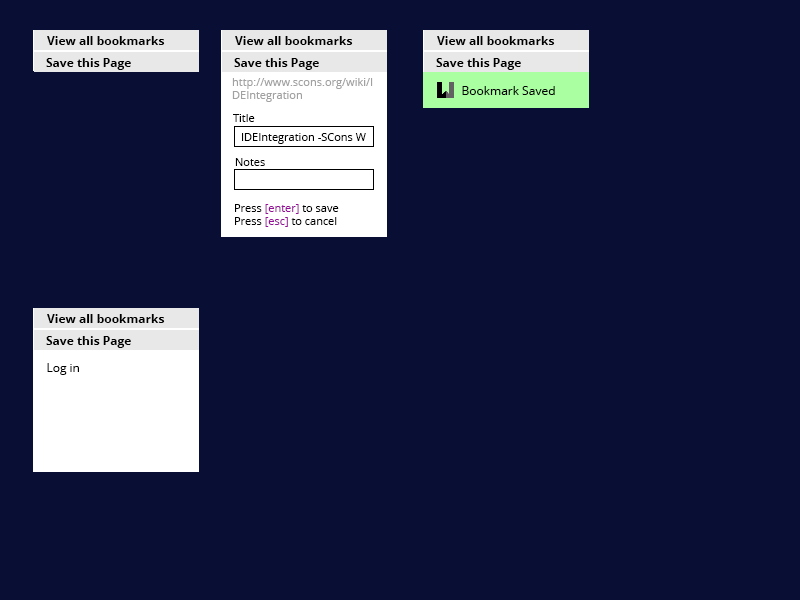
<style>
.page{position:relative;width:800px;height:600px;background:#090f34}
.page>*{position:absolute;margin:0}
.t1{font:12px "OpenSans-Bold";color:#000000}
.t2{font:11px "OpenSans";color:#a1a1a1}
.t3{font:12px "OpenSans";color:#000000}
.t4{font:11px "OpenSans";color:#000000}
.t5{font:11px "OpenSans";color:#971099}
</style>
<div class="page">
<p class="t1" style="left:47px;top:36px;width:118px;height:9px">View all bookmarks</p>
<p class="t1" style="left:235px;top:36px;width:118px;height:9px">View all bookmarks</p>
<p class="t1" style="left:437px;top:36px;width:118px;height:9px">View all bookmarks</p>
<p class="t1" style="left:46px;top:58px;width:85px;height:12px">Save this Page</p>
<p class="t1" style="left:234px;top:58px;width:85px;height:12px">Save this Page</p>
<p class="t1" style="left:436px;top:58px;width:85px;height:12px">Save this Page</p>
<p class="t2" style="left:232px;top:78px;width:141px;height:24px">http://www.scons.org/wiki/I<br>DEIntegration</p>
<p class="t3" style="left:462px;top:86px;width:93px;height:9px">Bookmark Saved</p>
<p class="t4" style="left:233px;top:114px;width:22px;height:8px">Title</p>
<p class="t4" style="left:242px;top:133px;width:124px;height:11px">IDEIntegration -SCons W</p>
<p class="t4" style="left:235px;top:158px;width:30px;height:8px">Notes</p>
<p class="t4" style="left:235px;top:204px;width:104px;height:23px">Press <span class="t5">[enter] </span>to save<br>Press <span class="t5">[esc]</span> to cancel</p>
<p class="t1" style="left:47px;top:314px;width:118px;height:9px">View all bookmarks</p>
<p class="t1" style="left:46px;top:336px;width:85px;height:12px">Save this Page</p>
<p class="t3" style="left:47px;top:363px;width:32px;height:12px">Log in</p>
</div>
